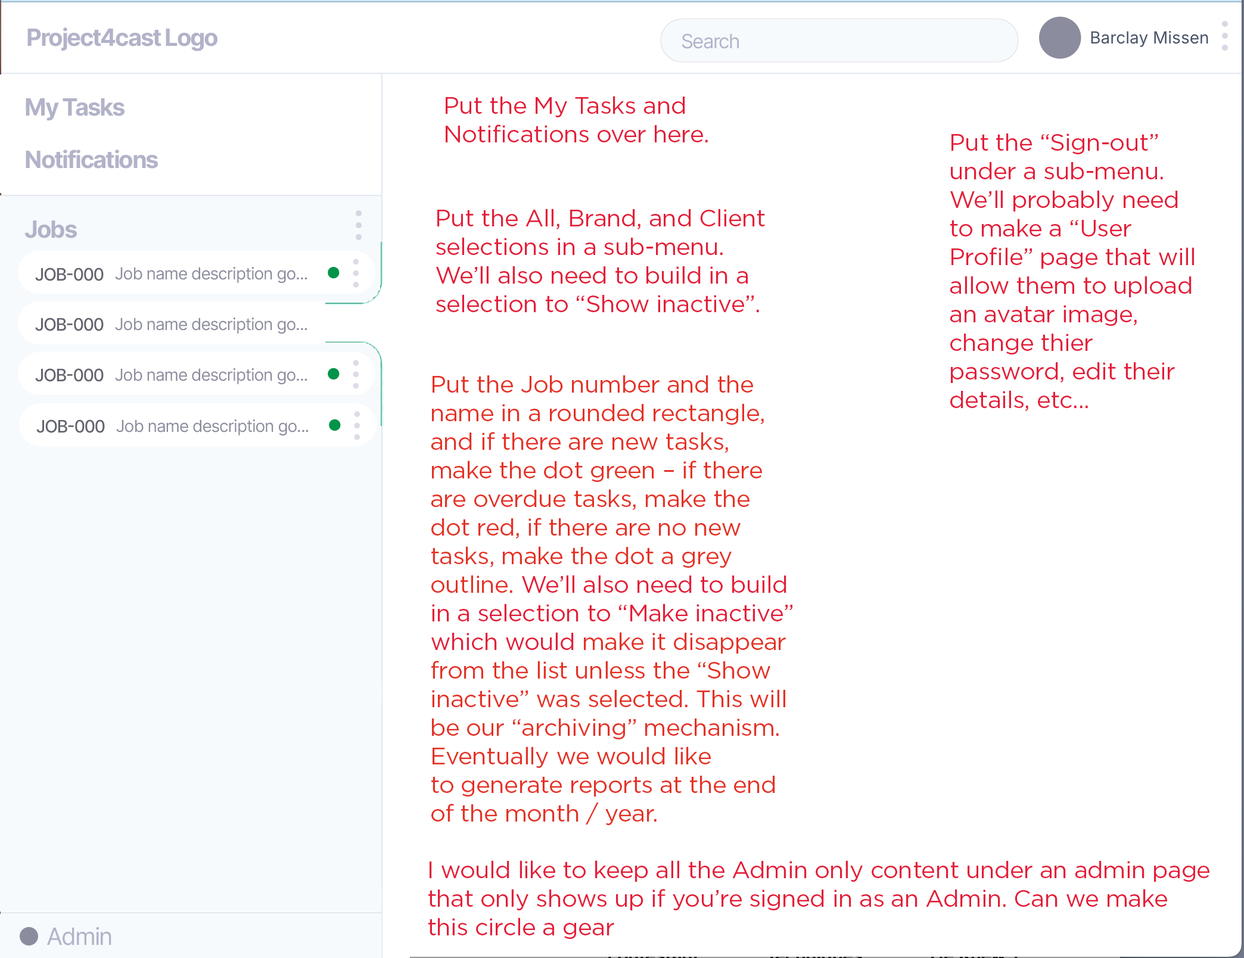
<style>
.page{position:relative;width:1244px;height:958px;background:#ffffff}
.page>*{position:absolute;margin:0}
.t1{font:23.8px "Inter-Bold";letter-spacing:-0.055em;color:#b2b3c9}
.t2{font:19.7px "Inter-Regular";letter-spacing:-0.055em;color:#b2b3c9}
.t3{font:23.8px/52.4px "Inter-Bold";letter-spacing:-0.055em;color:#b2b3c9}
.t4{font:23.8px "Gotham-Book";letter-spacing:-0.015em;color:#e41d39}
.t5{font:17.2px "Inter-Medium";letter-spacing:-0.055em;color:#63646e}
.t6{font:16.6px "Inter-Regular";letter-spacing:-0.035em;color:#8b8c9d}
.t7{font:23.8px "Gotham-Book";letter-spacing:-0.015em;color:#e53125}
.t8{font:23.8px "Inter-Regular";letter-spacing:-0.055em;color:#b2b3c9}
</style>
<div class="page">
<p class="t1" style="left:27px;top:27px;width:191px;height:24px">Project4cast Logo</p>
<p class="t2" style="left:682px;top:33px;width:57px;height:16px">Search</p>
<p class="t3" style="left:26px;top:98px;width:132px;height:71px">My Tasks<br>Notifications</p>
<p class="t4" style="left:446px;top:96px;width:262px;height:46px">Put the My Tasks and Notifications over here.</p>
<p class="t4" style="left:950px;top:133px;width:244px;height:278px">Put the “Sign-out” under a sub-menu. <br>We’ll probably need to make a “User Profile” page that will allow them to upload an avatar image, change thier password, edit their details, etc...</p>
<p class="t4" style="left:436px;top:209px;width:329px;height:103px">Put the All, Brand, and Client selections in a sub-menu.<br>We’ll also need to build in a selection to “Show inactive”.</p>
<p class="t5" style="left:35px;top:268px;width:69px;height:13px">JOB-000</p>
<p class="t6" style="left:115px;top:267px;width:193px;height:16px">Job name description go...</p>
<p class="t5" style="left:35px;top:318px;width:69px;height:13px">JOB-000</p>
<p class="t6" style="left:115px;top:318px;width:193px;height:16px">Job name description go...</p>
<p class="t5" style="left:35px;top:368px;width:69px;height:14px">JOB-000</p>
<p class="t6" style="left:115px;top:368px;width:193px;height:16px">Job name description go...</p>
<p class="t7" style="left:431px;top:375px;width:362px;height:450px">Put the Job number and the name in a rounded rectangle, and if there are new tasks, make the dot green – if there are overdue tasks, make the dot red, if there are no new tasks, make the dot a grey outline. <span class="t4">We’ll also need to build in a selection to “Make inactive” which would </span>make it disappear from the list unless the “Show inactive” was selected. This will be our “archiving” mechanism. Eventually we would like <br>to generate reports at the end of the month / year.</p>
<p class="t5" style="left:36px;top:420px;width:69px;height:13px">JOB-000</p>
<p class="t6" style="left:116px;top:420px;width:193px;height:16px">Job name description go...</p>
<p class="t4" style="left:428px;top:861px;width:782px;height:78px">I would like to keep all the Admin only content under an admin page <br>that only shows up if you’re signed in as an Admin. Can we make <br>this circle a gear</p>
<p class="t8" style="left:47px;top:927px;width:64px;height:19px">Admin</p>
</div>
